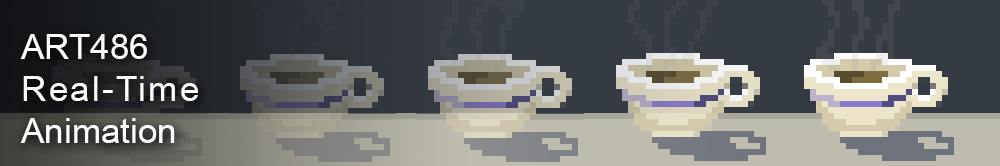
<style>
.page{position:relative;width:1000px;height:166px;background:#353b43}
.page>*{position:absolute;margin:0}
.t1{font:35px "ArialMT";letter-spacing:0.065em;color:#ffffff}
.t2{font:35px "ArialMT";color:#ffffff}
</style>
<div class="page">
<p class="t1" style="left:20px;top:34px;width:178px;height:109px"><span class="t2">ART486<br></span>Real-Time<br><span class="t2">Animation</span></p>
</div>
